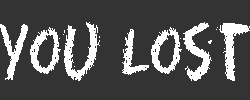
<style>
.page{position:relative;width:250px;height:100px;background:#333333}
.page>*{position:absolute;margin:0}
.t1{font:74.1px "Eraser-Regular";color:#ffffff;scale:0.68 1}
</style>
<div class="page">
<p class="t1" style="left:0px;top:22px;width:251px;height:59px">You Lost</p>
</div>
